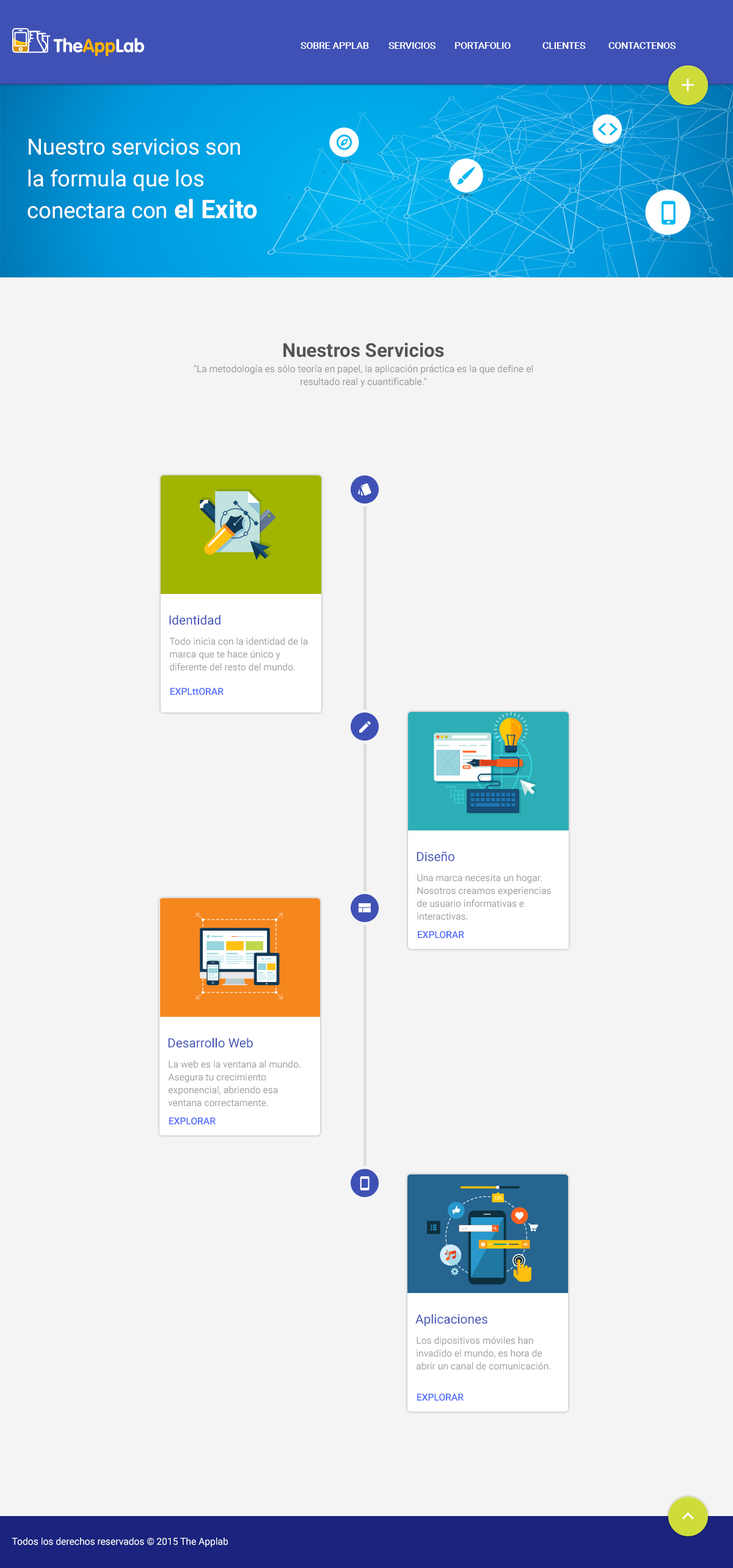
<style>
.page{position:relative;width:733px;height:1568px;background:#f4f4f4}
.page>*{position:absolute;margin:0}
.t1{font:9.5px "Roboto-Medium";color:#ffffff;text-transform:uppercase}
.t2{font:22.3px/31.8px "Roboto-Regular";color:#ffffff}
.t3{font:25.5px/31.8px "Roboto-Bold";color:#ffffff}
.t4{font:19.1px "Roboto-Bold";color:#545454}
.t5{font:9.5px/12.7px "Roboto-Regular";color:#9b9b9b}
.t6{font:12.7px "Roboto-Regular";color:#3f51b5}
.t7{font:9.5px/12.7px "Roboto-Regular";color:#a3a3a3}
.t8{font:9.5px "Roboto-Medium";color:#526cfd}
.t9{font:9.5px "Roboto-Regular";color:#ffffff}
</style>
<div class="page">
<p class="t1" style="left:301px;top:42px;width:375px;height:7px">Sobre APPLAB servicios portafolio  clientes  contactenos</p>
<p class="t2" style="left:27px;top:138px;width:230px;height:81px">Nuestro servicios son <br>la formula que los <br>conectara con <span class="t3">el Exito</span></p>
<p class="t4" style="left:284px;top:342px;width:160px;height:15px">Nuestros Servicios</p>
<p class="t5" style="left:194px;top:365px;width:339px;height:22px;text-align:center">"La metodología es sólo teoría en papel, la aplicación práctica es la que define el resultado real y cuantificable."</p>
<p class="t6" style="left:169px;top:615px;width:52px;height:10px">Identidad</p>
<p class="t7" style="left:169px;top:637px;width:139px;height:34px">Todo inicia con la identidad de la marca que te hace único y diferente del resto del mundo.</p>
<p class="t8" style="left:170px;top:687px;width:54px;height:8px">EXPLttORAR</p>
<p class="t6" style="left:417px;top:851px;width:38px;height:11px">Diseño</p>
<p class="t7" style="left:417px;top:874px;width:134px;height:46px">Una marca necesita un hogar. Nosotros creamos experiencias de usuario informativas e interactivas.</p>
<p class="t8" style="left:418px;top:931px;width:46px;height:8px">EXPLORAR</p>
<p class="t6" style="left:168px;top:1038px;width:85px;height:10px">Desarrollo Web</p>
<p class="t7" style="left:168px;top:1060px;width:133px;height:47px">La web es la ventana al mundo. Asegura tu crecimiento exponencial, abriendo esa ventana correctamente.</p>
<p class="t8" style="left:169px;top:1117px;width:47px;height:8px">EXPLORAR</p>
<p class="t6" style="left:416px;top:1314px;width:72px;height:13px">Aplicaciones</p>
<p class="t7" style="left:417px;top:1336px;width:134px;height:34px">Los dipositivos móviles han invadido el mundo, es hora de abrir un canal de comunicación.</p>
<p class="t8" style="left:417px;top:1393px;width:47px;height:8px">EXPLORAR</p>
<p class="t9" style="left:12px;top:1537px;width:216px;height:10px">Todos los derechos reservados © 2015 The Applab</p>
</div>
